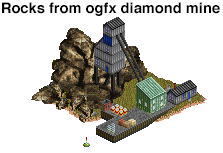
<style>
.page{position:relative;width:223px;height:153px;background:#ffffff}
.page>*{position:absolute;margin:0}
.t1{font:14.7px "Helvetica-Bold";color:#000000}
</style>
<div class="page">
<p class="t1" style="left:2px;top:2px;width:218px;height:14px">Rocks from ogfx diamond mine</p>
</div>
